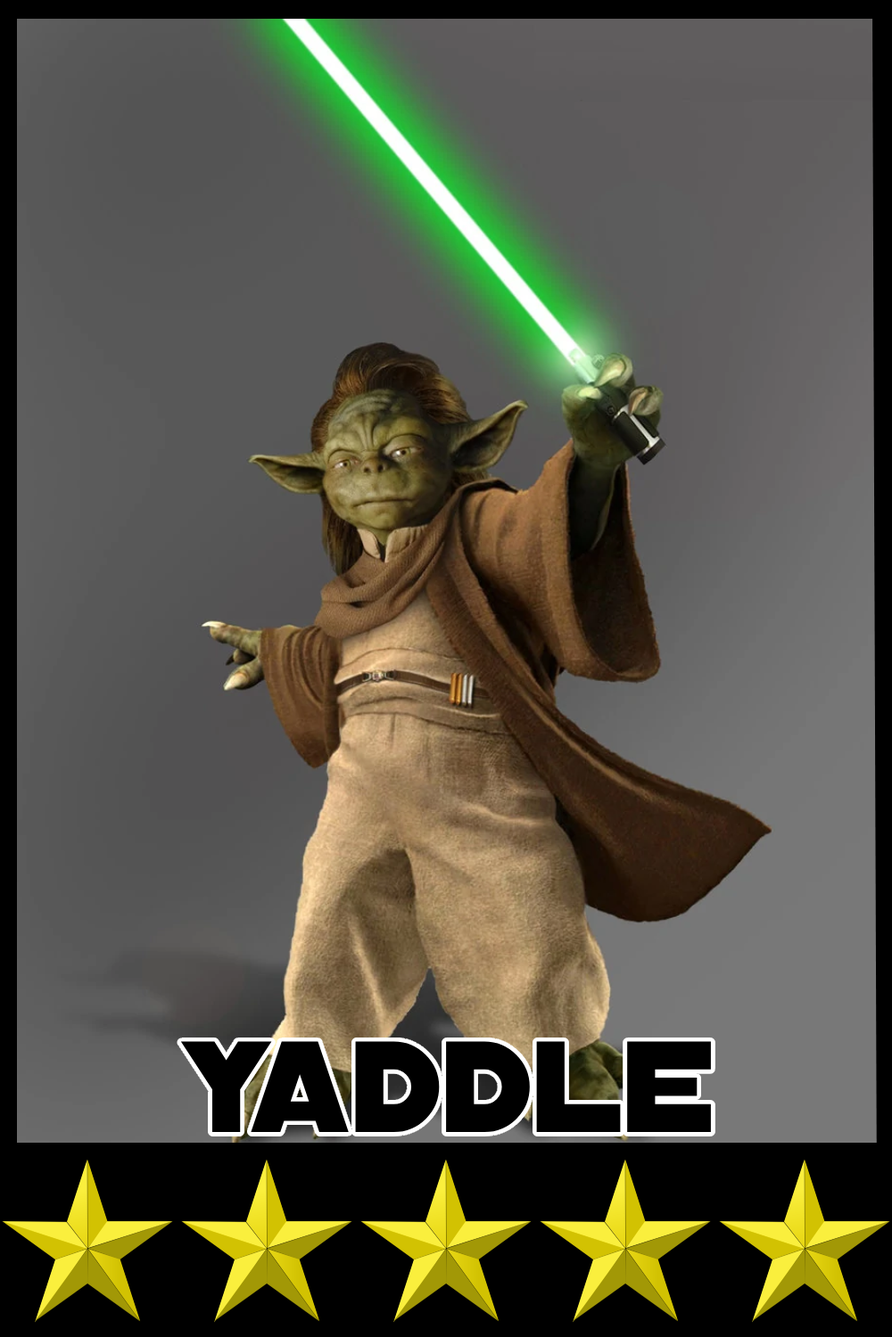
<style>
.page{position:relative;width:892px;height:1337px}
.page>*{position:absolute;margin:0}
.t1{font:139.3px "DistantGalaxy";color:#000000}
</style>
<div class="page">
<p class="t1" style="left:181px;top:1041px;width:530px;height:91px">yaddle</p>
</div>
